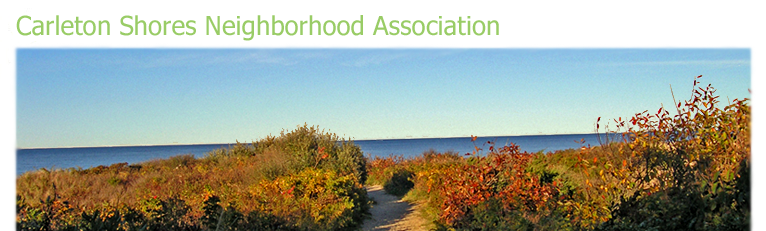
<style>
.page{position:relative;width:766px;height:231px}
.page>*{position:absolute;margin:0}
.t1{font:25.9px "Tahoma";color:#99cc66}
</style>
<div class="page">
<p class="t1" style="left:16px;top:15px;width:483px;height:26px">Carleton Shores Neighborhood Association</p>
</div>
